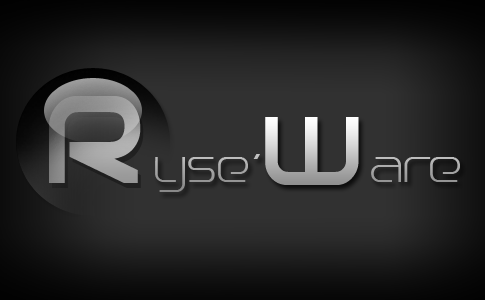
<style>
.page{position:relative;width:485px;height:300px}
.page>*{position:absolute;margin:0}
.t1{font:140px "BirdmanBold";color:#9a9a9a}
.t2{font:45px "BirdmanLight"}
.t3{font:110px "BirdmanBold"}
</style>
<div class="page">
<p class="t1" style="left:49px;top:96px;width:92px;height:87px">R</p>
<p class="t2" style="left:155px;top:117px;width:305px;height:75px">yse'<span class="t3">w</span>are</p>
</div>
